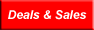
<style>
.page{position:relative;width:94px;height:30px;background:#ff0000}
.page>*{position:absolute;margin:0}
.t1{font:12px "Arial-BoldItalicMT";color:#ffffff}
</style>
<div class="page">
<p class="t1" style="left:8px;top:10px;width:79px;height:10px">Deals &amp; Sales</p>
</div>
